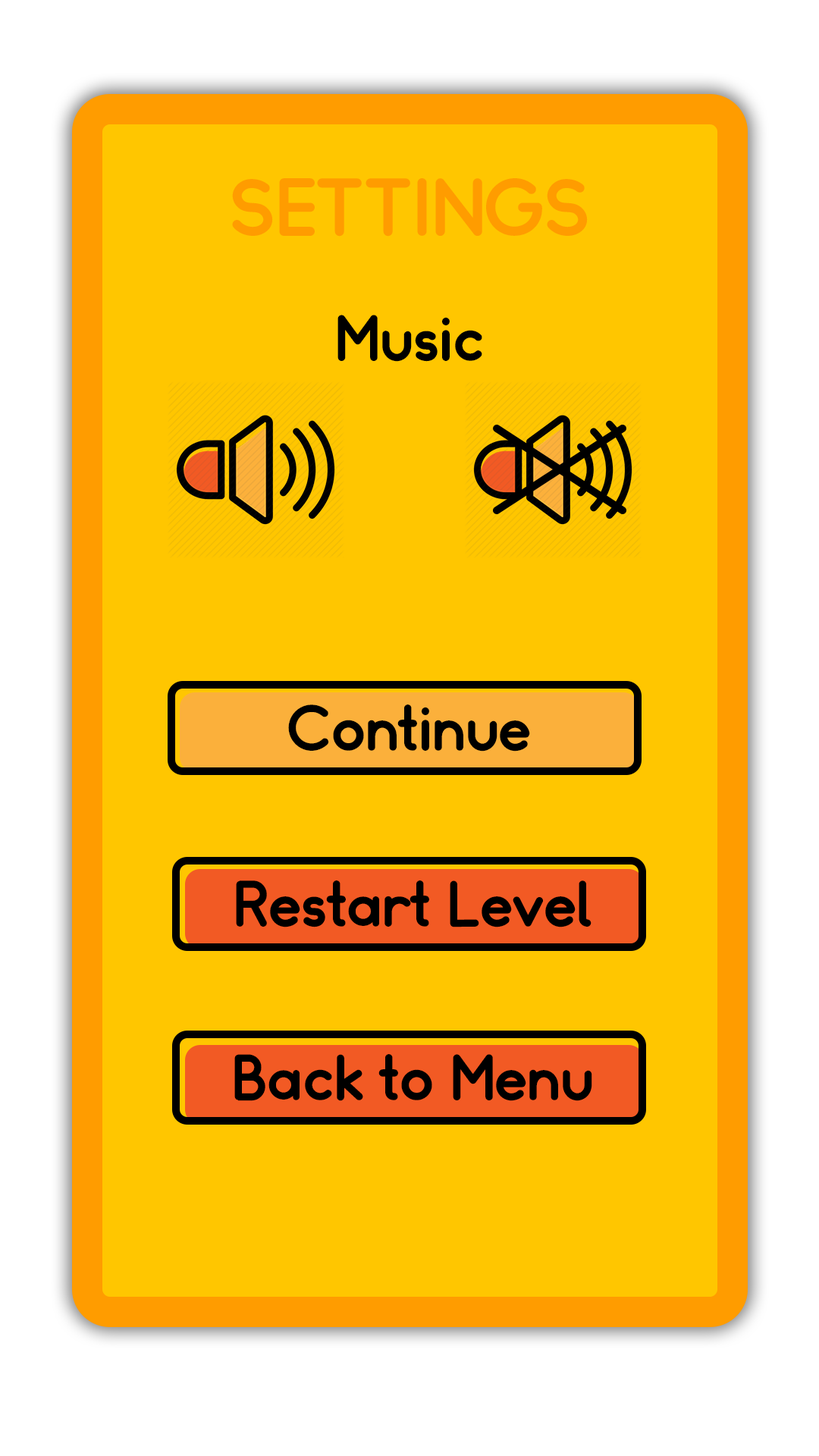
<style>
.page{position:relative;width:819px;height:1456px;background:#ffc600}
.page>*{position:absolute;margin:0}
.t1{font:75.8px "Somatic-Rounded";color:#ff9c00}
.t2{font:60.7px "Somatic-Rounded";color:#000000}
</style>
<div class="page">
<p class="t1" style="left:232px;top:178px;width:356px;height:59px">SETTINGS</p>
<p class="t2" style="left:337px;top:315px;width:145px;height:47px">Music</p>
<p class="t2" style="left:288px;top:704px;width:242px;height:47px">Continue</p>
<p class="t2" style="left:236px;top:880px;width:355px;height:47px">Restart Level</p>
<p class="t2" style="left:234px;top:1054px;width:358px;height:47px">Back to Menu</p>
</div>
